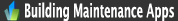
<style>
.page{position:relative;width:178px;height:21px;background:#333333}
.page>*{position:absolute;margin:0}
.t1{font:19px "LucidaSans-Demi";color:#ffffff;scale:0.57 1}
</style>
<div class="page">
<p class="t1" style="left:25px;top:2px;width:149px;height:20px">Building Maintenance Apps</p>
</div>
